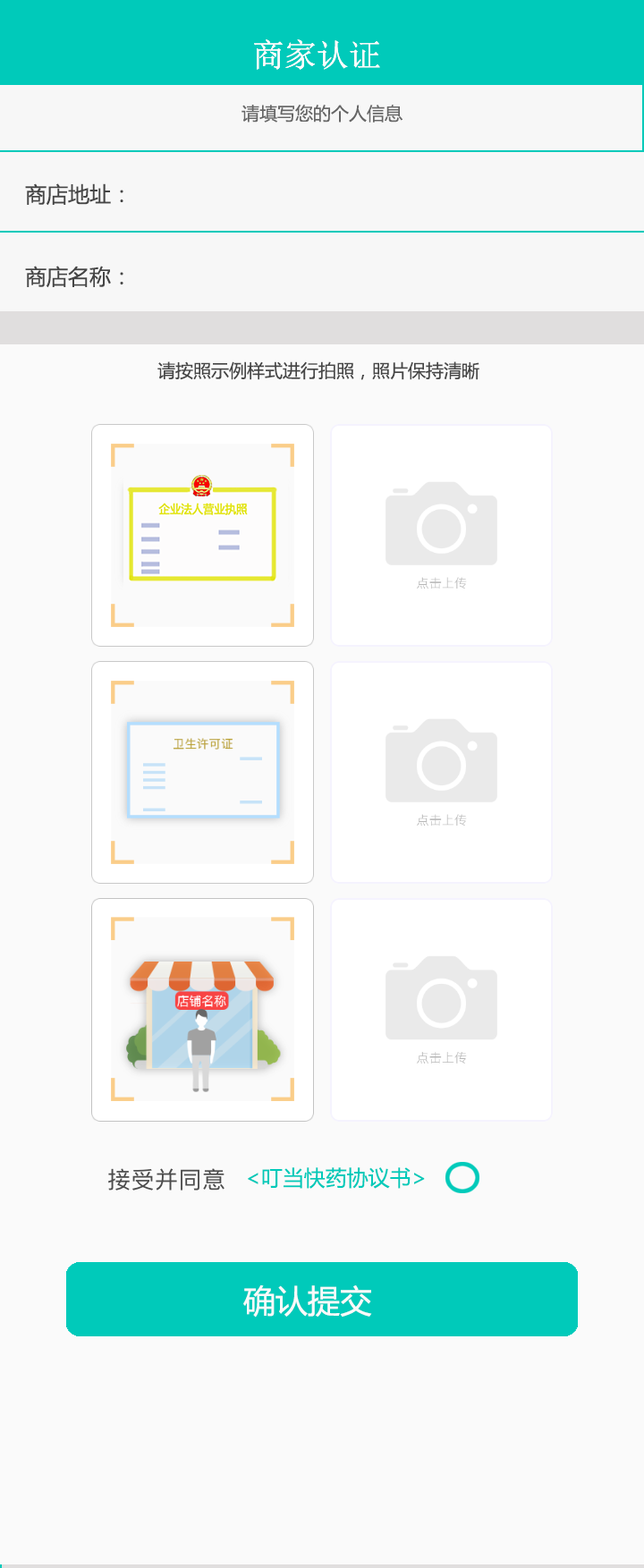
<style>
.page{position:relative;width:644px;height:1568px;background:#fafafa}
.page>*{position:absolute;margin:0}
.t1{font:32.2px "NSimSun";color:#fdfcfc}
.t2{font:17.9px "MicrosoftYaHei";color:#666666}
.t3{font:21.5px "MicrosoftYaHei";color:#454545}
.t4{font:17.9px "MicrosoftYaHei";color:#464646}
.t5{font:21.5px "MicrosoftYaHei";color:#00caba}
.t6{font:32.2px "MicrosoftYaHei";color:#fafafa}
</style>
<div class="page">
<p class="t1" style="left:254px;top:39px;width:126px;height:31px">商家认证</p>
<p class="t1" style="left:254px;top:39px;width:126px;height:31px">商家认证</p>
<p class="t2" style="left:242px;top:105px;width:161px;height:18px">请填写您的个人信息</p>
<p class="t3" style="left:25px;top:183px;width:98px;height:23px">商店地址：</p>
<p class="t3" style="left:25px;top:266px;width:98px;height:22px">商店名称：</p>
<p class="t4" style="left:157px;top:361px;width:322px;height:19px">请按照示例样式进行拍照，照片保持清晰</p>
<p class="t5" style="left:248px;top:1167px;width:177px;height:22px">&lt;叮当快药协议书&gt;</p>
<p class="t6" style="left:243px;top:1284px;width:129px;height:34px">确认提交</p>
</div>
